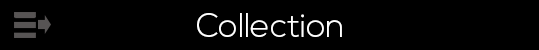
<style>
.page{position:relative;width:539px;height:50px;background:#000000}
.page>*{position:absolute;margin:0}
.t1{font:33.1px "NexaLight";color:#ffffff}
</style>
<div class="page">
<p class="t1" style="left:197px;top:13px;width:145px;height:24px">Collection</p>
</div>
